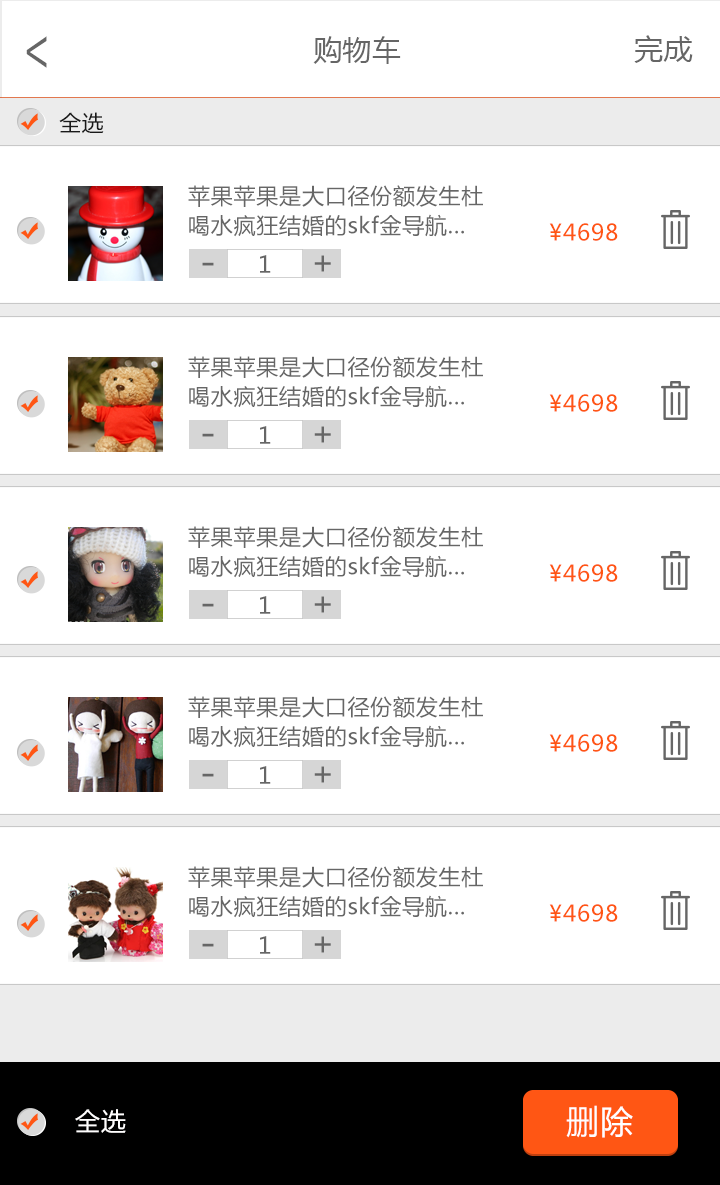
<style>
.page{position:relative;width:720px;height:1185px;background:#ffffff}
.page>*{position:absolute;margin:0}
.t1{font:51.9px "AdobeHeitiStd-Regular";color:#666666;scale:0.72 1}
.t2{font:29.2px "MicrosoftYaHei";color:#666666}
.t3{font:22px "MicrosoftYaHei";letter-spacing:0.035em;color:#191919}
.t4{font:22px/29.5px "MicrosoftYaHei";letter-spacing:0.035em;color:#666666}
.t5{font:22.6px "MicrosoftYaHei";letter-spacing:0.035em;color:#ff5614}
.t6{font:23px "MicrosoftYaHei";letter-spacing:0.035em;color:#666666}
.t7{font:32.1px "MicrosoftYaHei";letter-spacing:0.035em;color:#666666}
.t8{font:37.5px "MicrosoftYaHei";letter-spacing:0.035em;color:#666666}
.t9{font:25px "MicrosoftYaHei";letter-spacing:0.035em;color:#fffefe}
.t10{font:32.8px "MicrosoftYaHei";letter-spacing:0.035em;color:#fffefe}
</style>
<div class="page">
<p class="t1" style="left:26px;top:36px;width:21px;height:32px;rotate:180deg">&gt;</p>
<p class="t2" style="left:313px;top:36px;width:88px;height:28px">购物车</p>
<p class="t2" style="left:634px;top:35px;width:59px;height:28px">完成</p>
<p class="t3" style="left:59px;top:112px;width:45px;height:22px">全选</p>
<p class="t4" style="left:188px;top:185px;width:295px;height:52px">苹果苹果是大口径份额发生杜<br>喝水疯狂结婚的skf金导航...</p>
<p class="t5" style="left:549px;top:223px;width:69px;height:18px">¥4698</p>
<p class="t6" style="left:260px;top:255px;width:11px;height:18px">1</p>
<p class="t7" style="left:314px;top:255px;width:17px;height:17px">+</p>
<p class="t8" style="left:202px;top:262px;width:12px;height:4px">-</p>
<p class="t4" style="left:188px;top:356px;width:295px;height:52px">苹果苹果是大口径份额发生杜<br>喝水疯狂结婚的skf金导航...</p>
<p class="t5" style="left:549px;top:394px;width:69px;height:18px">¥4698</p>
<p class="t8" style="left:202px;top:433px;width:12px;height:4px">-</p>
<p class="t6" style="left:260px;top:426px;width:11px;height:18px">1</p>
<p class="t7" style="left:314px;top:426px;width:17px;height:17px">+</p>
<p class="t4" style="left:188px;top:526px;width:295px;height:52px">苹果苹果是大口径份额发生杜<br>喝水疯狂结婚的skf金导航...</p>
<p class="t5" style="left:549px;top:564px;width:69px;height:18px">¥4698</p>
<p class="t8" style="left:202px;top:603px;width:12px;height:4px">-</p>
<p class="t6" style="left:260px;top:596px;width:11px;height:18px">1</p>
<p class="t7" style="left:314px;top:596px;width:17px;height:17px">+</p>
<p class="t4" style="left:188px;top:696px;width:295px;height:52px">苹果苹果是大口径份额发生杜<br>喝水疯狂结婚的skf金导航...</p>
<p class="t5" style="left:549px;top:734px;width:69px;height:18px">¥4698</p>
<p class="t8" style="left:202px;top:773px;width:12px;height:4px">-</p>
<p class="t6" style="left:260px;top:766px;width:11px;height:18px">1</p>
<p class="t7" style="left:314px;top:766px;width:17px;height:17px">+</p>
<p class="t4" style="left:188px;top:866px;width:295px;height:52px">苹果苹果是大口径份额发生杜<br>喝水疯狂结婚的skf金导航...</p>
<p class="t5" style="left:549px;top:904px;width:69px;height:18px">¥4698</p>
<p class="t6" style="left:260px;top:936px;width:11px;height:18px">1</p>
<p class="t7" style="left:314px;top:936px;width:17px;height:17px">+</p>
<p class="t8" style="left:202px;top:943px;width:12px;height:4px">-</p>
<p class="t9" style="left:75px;top:1109px;width:51px;height:24px">全选</p>
<p class="t10" style="left:566px;top:1105px;width:67px;height:33px">删除</p>
</div>
